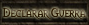
<style>
.page{position:relative;width:89px;height:25px}
.page>*{position:absolute;margin:0}
.t1{font:11.5px "Morpheus"}
</style>
<div class="page">
<p class="t1" style="left:2px;top:8px;width:85px;height:11px">Declarar Guerra</p>
</div>
